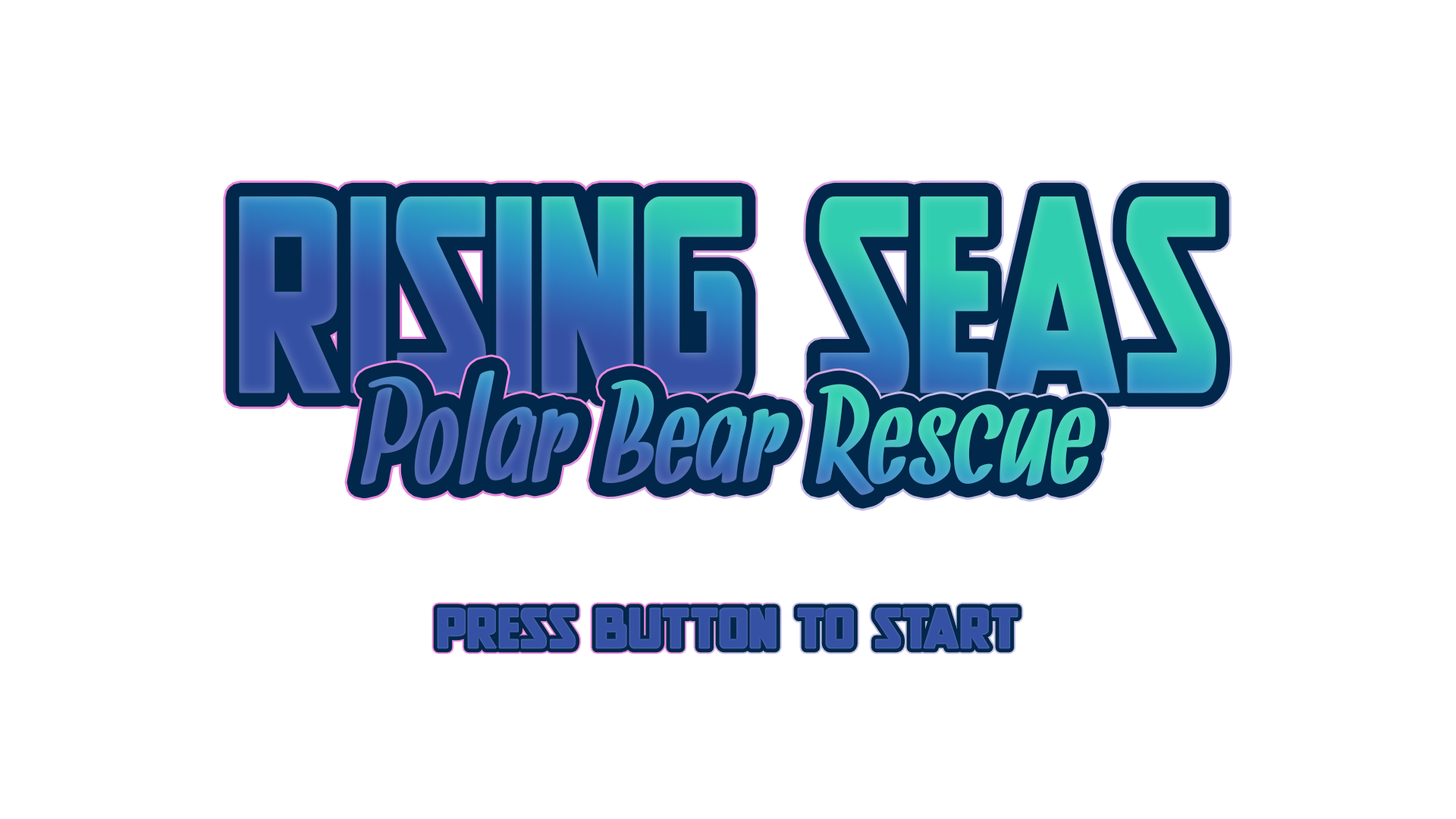
<style>
.page{position:relative;width:1456px;height:819px;background:#ffffff}
.page>*{position:absolute;margin:0}
.t1{font:272.8px "NewComicTitle";letter-spacing:-0.05em;font-weight:bold;scale:0.87 1}
.t2{font:149.5px "Snickles";font-weight:bold;scale:0.86 1}
</style>
<div class="page">
<p class="t1" style="left:239px;top:196px;width:977px;height:198px">Rising Seas</p>
<p class="t2" style="left:360px;top:370px;width:736px;height:125px">Polar Bear Rescue</p>
</div>
